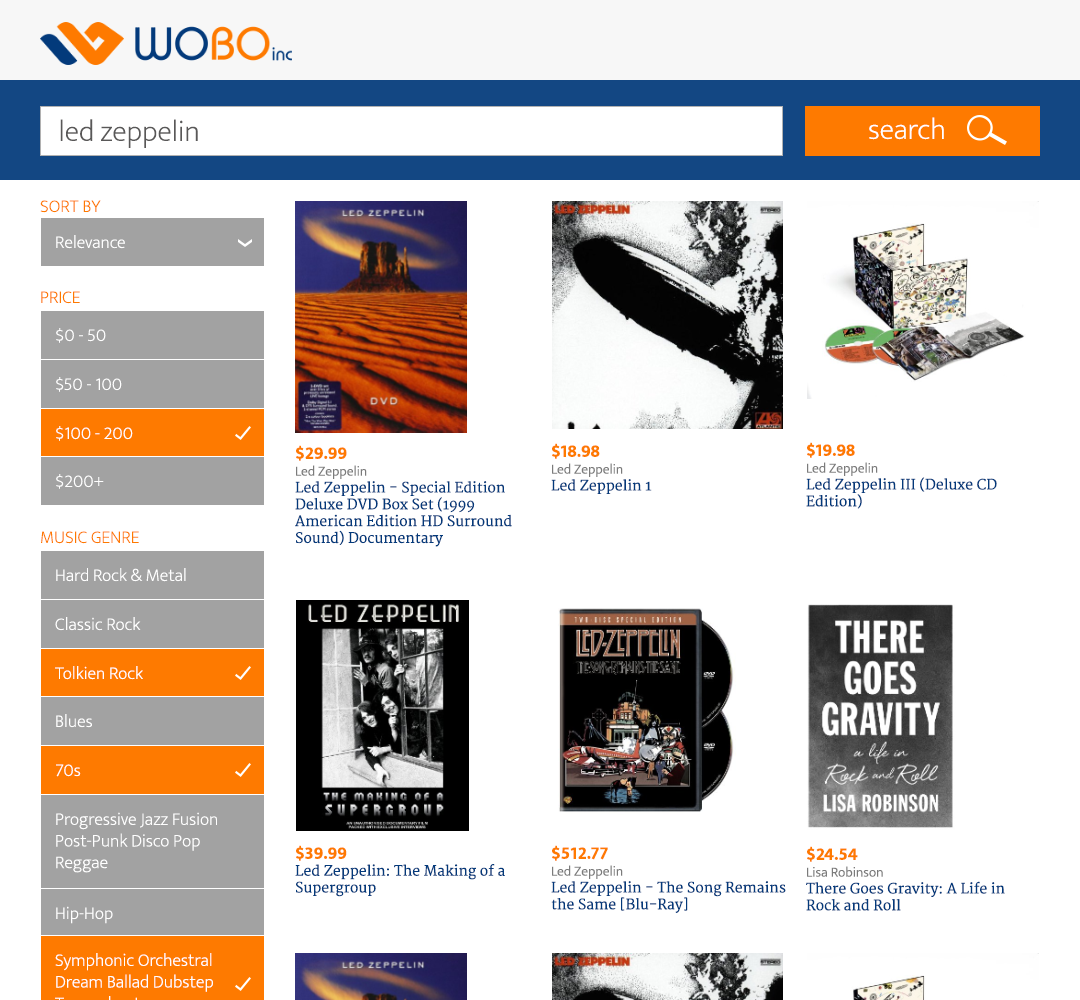
<style>
.page{position:relative;width:1080px;height:1000px;background:#ffffff}
.page>*{position:absolute;margin:0}
.t1{font:30px "EkMukta-ExtraLight";color:#595858}
.t2{font:30px "EkMukta-ExtraLight";color:#ffffff}
.t3{font:18px "EkMukta-ExtraLight";color:#fe7a00}
.t4{font:18px "EkMukta-ExtraLight";color:#ffffff}
.t5{font:14px "Merriweather";color:#033a7b}
.t6{font:18px "EkMukta-Bold";color:#fe7a00}
.t7{font:14px "EkMukta-Light";color:#7b7b7b}
</style>
<div class="page">
<p class="t1" style="left:60px;top:119px;width:138px;height:29px">led zeppelin</p>
<p class="t2" style="left:869px;top:117px;width:75px;height:23px">search</p>
<p class="t3" style="left:40px;top:200px;width:61px;height:13px">SORT BY</p>
<p class="t4" style="left:56px;top:235px;width:69px;height:14px">Relevance</p>
<p class="t3" style="left:41px;top:291px;width:39px;height:13px">PRICE</p>
<p class="t4" style="left:56px;top:328px;width:50px;height:15px">$0 - 50</p>
<p class="t4" style="left:56px;top:377px;width:66px;height:15px">$50 - 100</p>
<p class="t4" style="left:56px;top:426px;width:77px;height:15px">$100 - 200</p>
<p class="t5" style="left:295px;top:445px;width:217px;height:102px"><span class="t6">$29.99<br></span><span class="t7">Led Zeppelin<br></span>Led Zeppelin - Special Edition Deluxe DVD Box Set (1999 American Edition HD Surround Sound) Documentary</p>
<p class="t5" style="left:551px;top:443px;width:101px;height:51px"><span class="t6">$18.98<br></span><span class="t7">Led Zeppelin<br></span>Led Zeppelin 1</p>
<p class="t5" style="left:806px;top:442px;width:191px;height:67px"><span class="t6">$19.98<br></span><span class="t7">Led Zeppelin<br></span>Led Zeppelin III (Deluxe CD Edition)</p>
<p class="t4" style="left:56px;top:474px;width:48px;height:15px">$200+</p>
<p class="t3" style="left:41px;top:531px;width:98px;height:13px">MUSIC GENRE</p>
<p class="t4" style="left:56px;top:568px;width:130px;height:14px">Hard Rock &amp; Metal</p>
<p class="t4" style="left:55px;top:617px;width:86px;height:14px">Classic Rock</p>
<p class="t4" style="left:55px;top:666px;width:88px;height:14px">Tolkien Rock</p>
<p class="t4" style="left:56px;top:714px;width:36px;height:14px">Blues</p>
<p class="t4" style="left:56px;top:764px;width:25px;height:13px">70s</p>
<p class="t4" style="left:56px;top:812px;width:161px;height:61px">Progressive Jazz Fusion Post-Punk Disco Pop Reggae</p>
<p class="t5" style="left:295px;top:845px;width:210px;height:52px"><span class="t6">$39.99<br></span>Led Zeppelin: The Making of a Supergroup</p>
<p class="t5" style="left:551px;top:845px;width:235px;height:68px"><span class="t6">$512.77<br></span><span class="t7">Led Zeppelin<br></span>Led Zeppelin - The Song Remains the Same [Blu-Ray]</p>
<p class="t5" style="left:806px;top:846px;width:199px;height:65px"><span class="t6">$24.54<br></span><span class="t7">Lisa Robinson<br></span>There Goes Gravity: A Life in Rock and Roll</p>
<p class="t4" style="left:56px;top:906px;width:57px;height:18px">Hip-Hop</p>
</div>
